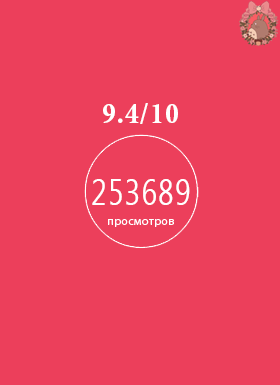
<style>
.page{position:relative;width:280px;height:385px;background:#ec3f5b}
.page>*{position:absolute;margin:0}
.t1{font:30px "MinionPro-BoldCn";letter-spacing:0.03em;color:#ffffff}
.t2{font:36px "MicrosoftTaiLe";letter-spacing:0.03em;color:#ffffff;scale:0.82 1}
</style>
<div class="page">
<p class="t1" style="left:103px;top:103px;width:75px;height:21px">9.4/10</p>
<p class="t2" style="left:92px;top:179px;width:98px;height:26px">253689</p>
</div>
